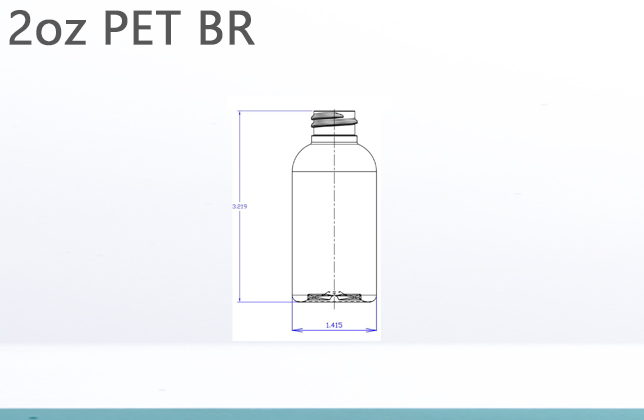
<style>
.page{position:relative;width:644px;height:420px}
.page>*{position:absolute;margin:0}
.t1{font:48px "Gadugi";color:#575757;font-weight:bold}
</style>
<div class="page">
<p class="t1" style="left:9px;top:10px;width:246px;height:36px">2oz PET BR</p>
</div>
